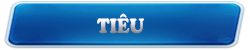
<style>
.page{position:relative;width:250px;height:50px}
.page>*{position:absolute;margin:0}
.t1{font:21.6px "UTM-Cooper-Black";text-transform:uppercase;scale:0.83 1}
</style>
<div class="page">
<p class="t1" style="left:97px;top:13px;width:47px;height:21px">tiêu</p>
</div>
